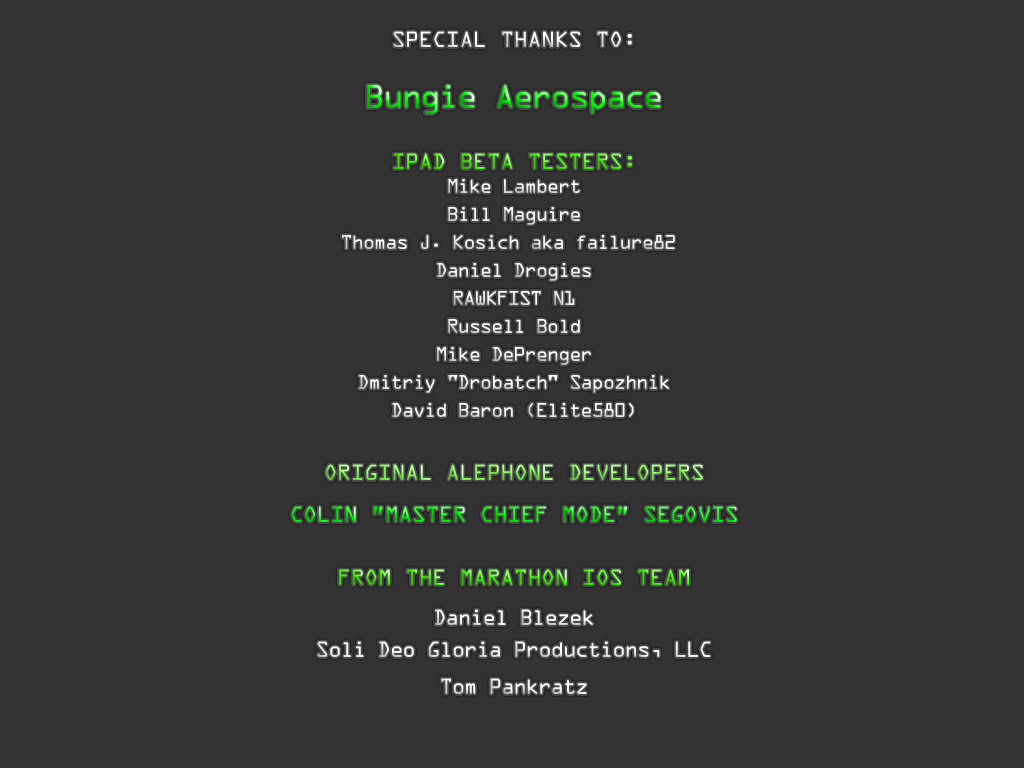
<style>
.page{position:relative;width:1024px;height:768px;background:#333333}
.page>*{position:absolute;margin:0}
.t1{font:18px/28px "OCRAStd";letter-spacing:-0.1em}
.t2{font:20px/21px "OCRAStd";letter-spacing:-0.04em;text-transform:uppercase}
.t3{font:30px/40px "OCRAStd";letter-spacing:-0.1em}
.t4{font:18px/24px "OCRAStd";letter-spacing:-0.1em}
.t5{font:19.9px/40px "OCRAStd";letter-spacing:-0.1em}
.t6{font:19.9px/32px "OCRAStd";letter-spacing:-0.1em}
.t7{font:19.9px/37px "OCRAStd";letter-spacing:-0.1em}
</style>
<div class="page">
<p class="t1" style="left:291px;top:31px;width:446px;height:663px;text-align:center"><span class="t2">Special Thanks to:<br><br></span><span class="t3">Bungie Aerospace<br><br></span><span class="t2">iPad Beta Testers:<br></span><span class="t4">Mike Lambert<br></span>Bill Maguire<br>Thomas J. Kosich aka failure82 <br>Daniel Drogies<br>RAWKFIST N1<br>Russell Bold<br>Mike DePrenger<br>Dmitriy "Drobatch" Sapozhnik<br>David Baron (Elite580)<br><br><br><span class="t2">Original AlephOne developers<br><br></span><span class="t2">Colin ”Master Chief Mode” Segovis<br></span><span class="t2"><br><br>from the Marathon iOS team<br></span><span class="t5">Daniel Blezek<br></span><span class="t6">Soli Deo Gloria Productions, LLC<br></span><span class="t7">Tom Pankratz</span></p>
</div>
